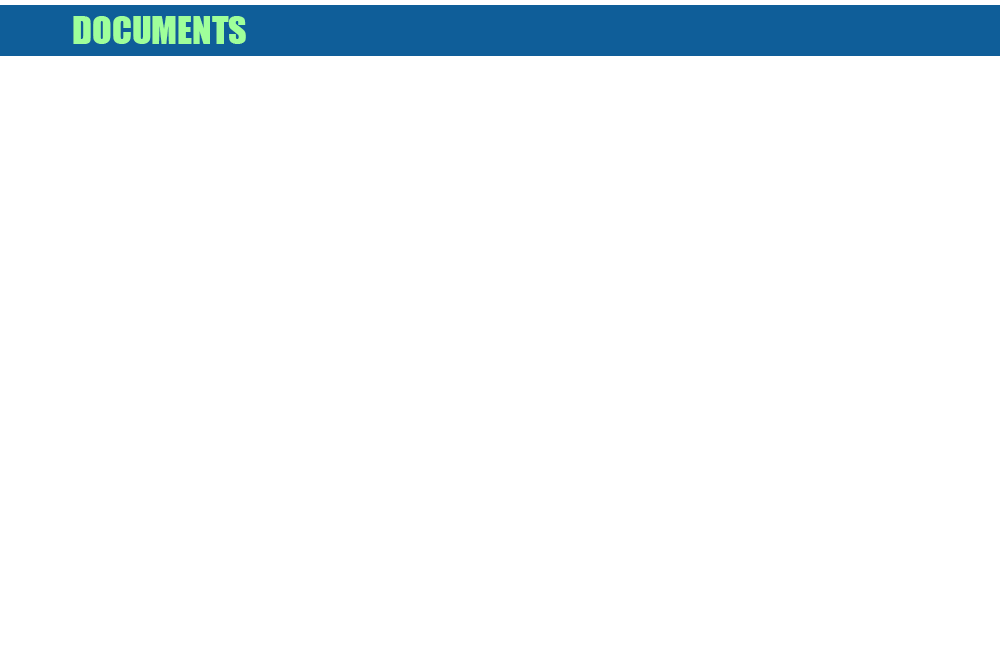
<style>
.page{position:relative;width:1000px;height:650px;background:#ffffff}
.page>*{position:absolute;margin:0}
.t1{font:36px "Impact";color:#9fff9a}
</style>
<div class="page">
<p class="t1" style="left:73px;top:16px;width:173px;height:28px">DOCUMENTS</p>
</div>
